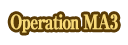
<style>
.page{position:relative;width:128px;height:45px;background:#ffffff}
.page>*{position:absolute;margin:0}
.t1{font:20px "RyuminPro-ExBold";letter-spacing:-0.08em;color:#f9db79;font-weight:bold;scale:0.8 1}
</style>
<div class="page">
<p class="t1" style="left:10px;top:14px;width:108px;height:19px">Operation MA3</p>
</div>
